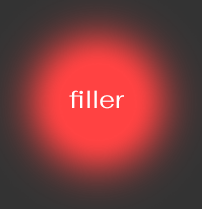
<style>
.page{position:relative;width:202px;height:209px}
.page>*{position:absolute;margin:0}
.t1{font:25.4px "Fahkwang-Regular";color:#ffffff}
</style>
<div class="page">
<p class="t1" style="left:69px;top:90px;width:55px;height:19px">filler</p>
</div>
